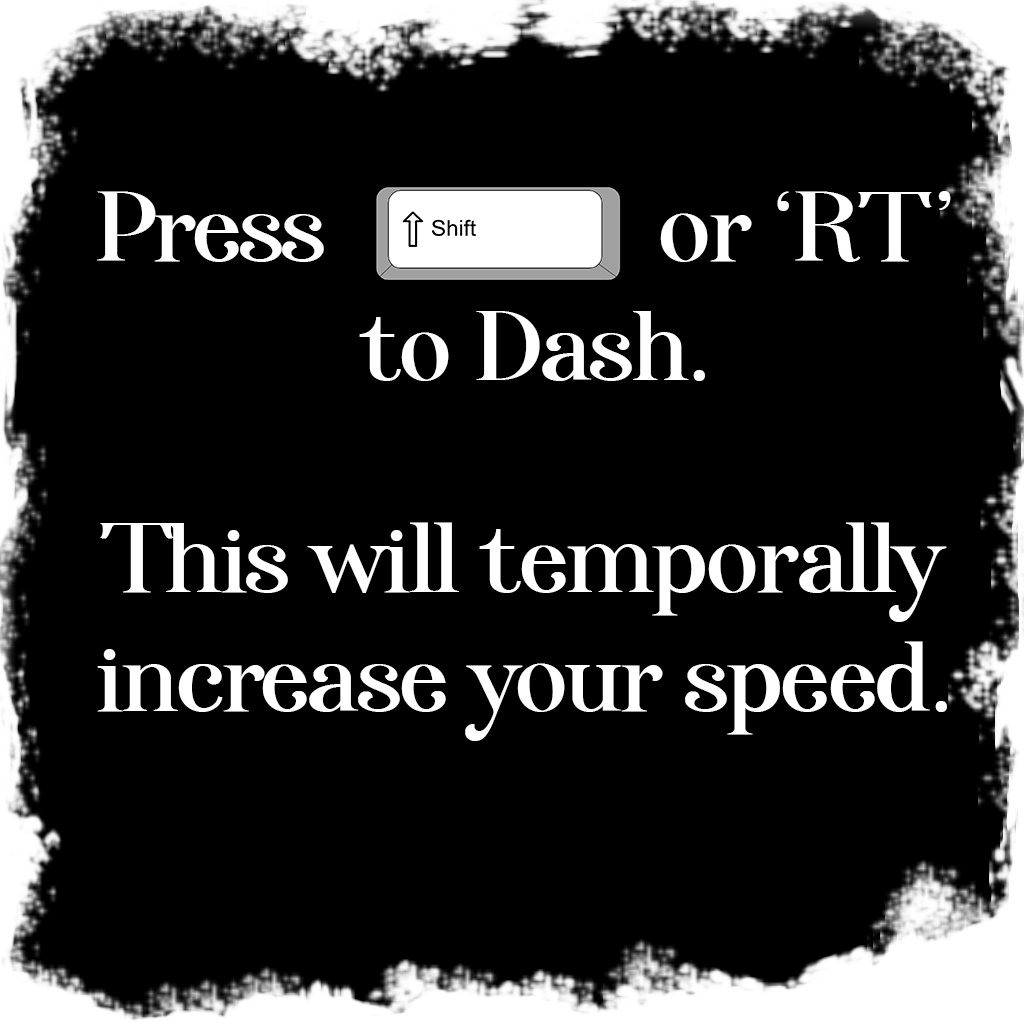
<style>
.page{position:relative;width:1024px;height:1024px;background:#000000}
.page>*{position:absolute;margin:0}
.t1{font:99.4px "Afterglow-Regular";color:#ffffff}
</style>
<div class="page">
<p class="t1" style="left:97px;top:191px;width:854px;height:550px;text-align:center">Press              or ‘RT’<br> to Dash.<br><br>This will temporally<br>increase your speed.</p>
</div>
